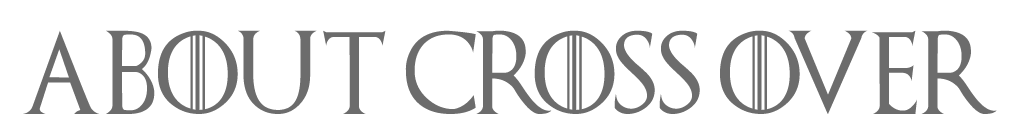
<style>
.page{position:relative;width:1020px;height:135px;background:#ffffff}
.page>*{position:absolute;margin:0}
.t1{font:83.3px "GameofThrones";color:#6c6c6c;scale:0.96 1}
</style>
<div class="page">
<p class="t1" style="left:23px;top:30px;width:974px;height:84px">ABOUT CROSS OVER</p>
</div>
